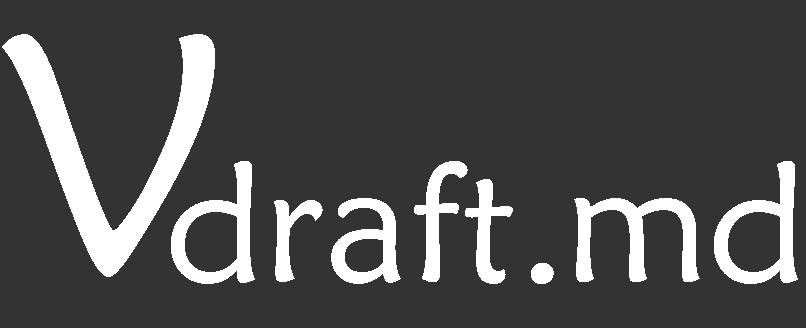
<style>
.page{position:relative;width:806px;height:328px;background:#333333}
.page>*{position:absolute;margin:0}
.t1{font:337.9px "STXinwei";color:#ffffff}
.t2{font:168.9px "STXinwei";color:#ffffff}
</style>
<div class="page">
<p class="t1" style="left:2px;top:34px;width:213px;height:243px">V</p>
<p class="t2" style="left:171px;top:161px;width:627px;height:123px">draft.md</p>
</div>
